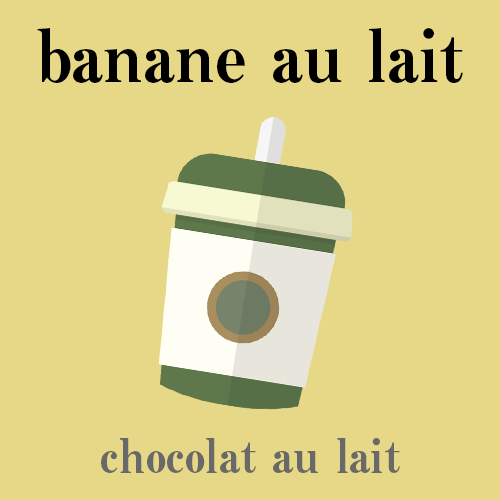
<style>
.page{position:relative;width:500px;height:500px;background:#e6d887}
.page>*{position:absolute;margin:0}
.t1{font:72px "MidashiMinPr6N-MA31";color:#000000}
.t2{font:48px "MidashiMinPr6N-MA31";color:#696969}
</style>
<div class="page">
<p class="t1" style="left:37px;top:28px;width:426px;height:55px">banane au lait</p>
<p class="t2" style="left:101px;top:438px;width:299px;height:35px">chocolat au lait</p>
</div>
